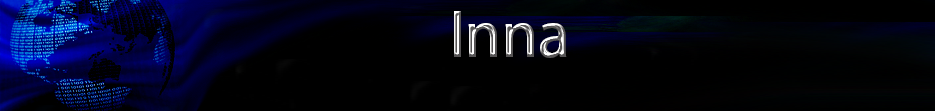
<style>
.page{position:relative;width:935px;height:111px;background:#000000}
.page>*{position:absolute;margin:0}
.t1{font:60px "AdobeHeitiStd-Regular"}
</style>
<div class="page">
<p class="t1" style="left:454px;top:11px;width:113px;height:47px">Inna</p>
</div>
